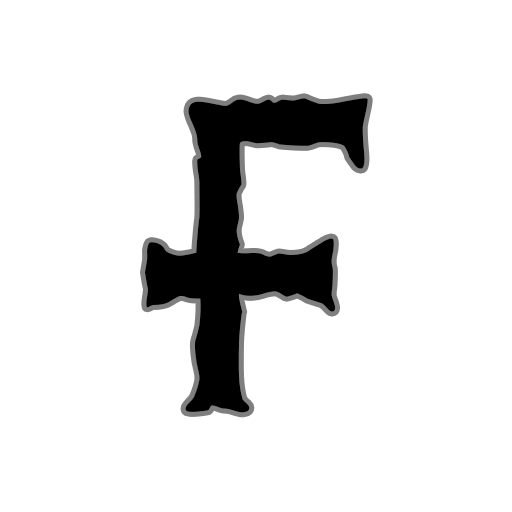
<style>
.page{position:relative;width:512px;height:512px;background:#ffffff}
.page>*{position:absolute;margin:0}
.t1{font:479.7px "PRViking";color:#000000}
</style>
<div class="page">
<p class="t1" style="left:145px;top:98px;width:223px;height:315px">F</p>
</div>
